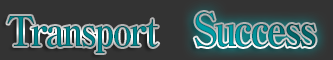
<style>
.page{position:relative;width:333px;height:60px;background:#333333}
.page>*{position:absolute;margin:0}
.t1{font:40px "RyuminPro-ExBold";letter-spacing:-0.08em;color:#00757b;scale:0.9 1}
.t2{font:45px "RyuminPro-ExBold";letter-spacing:-0.08em;scale:0.9 1}
</style>
<div class="page">
<p class="t1" style="left:7px;top:16px;width:152px;height:37px">Transport</p>
<p class="t2" style="left:194px;top:12px;width:122px;height:35px">Success</p>
</div>
